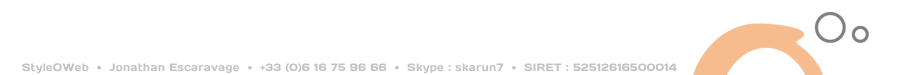
<style>
.page{position:relative;width:900px;height:75px;background:#ffffff}
.page>*{position:absolute;margin:0}
.t1{font:10.7px "Days";letter-spacing:0.025em;color:#c2c2c2}
</style>
<div class="page">
<p class="t1" style="left:22px;top:63px;width:655px;height:10px">StyleOWeb  •  Jonathan Escaravage  •  +33 (0)6 16 75 96 66  •  Skype : skarun7  •  SIRET : 52512616500014</p>
</div>
